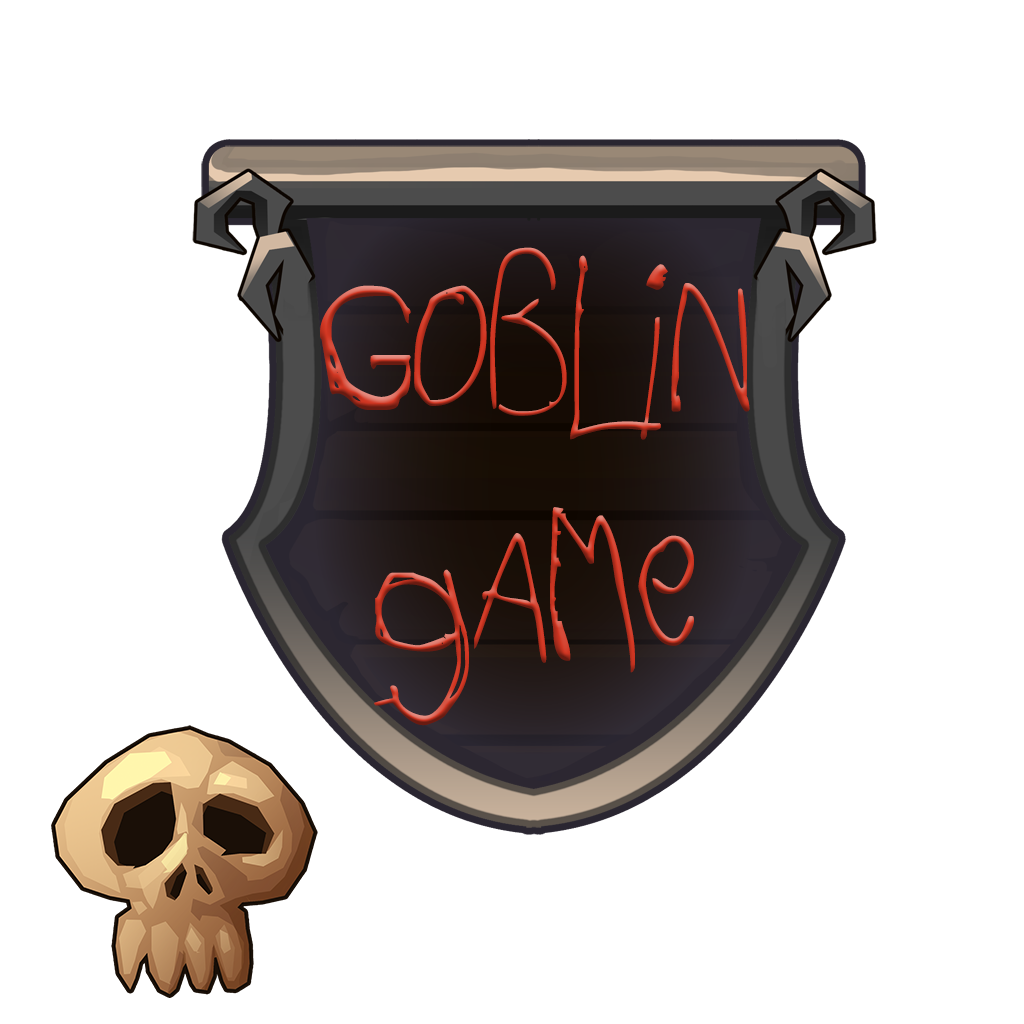
<style>
.page{position:relative;width:1024px;height:1024px;background:#ffffff}
.page>*{position:absolute;margin:0}
.t1{font:200px "AckiPreschool"}
</style>
<div class="page">
<p class="t1" style="left:320px;top:247px;width:430px;height:479px;text-align:center">Goblin<br>game</p>
</div>
